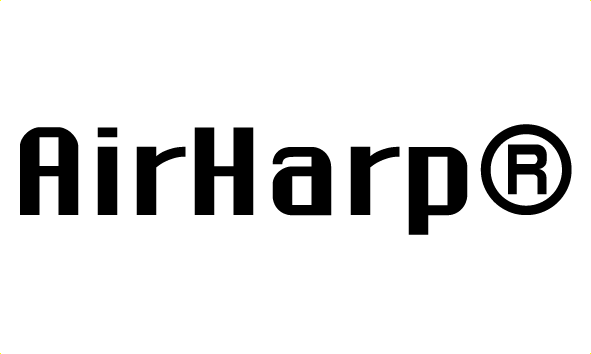
<style>
.page{position:relative;width:591px;height:354px;background:#ffffff}
.page>*{position:absolute;margin:0}
.t1{font:116.7px "ChicagoFLF";color:#000000}
</style>
<div class="page">
<p class="t1" style="left:20px;top:124px;width:552px;height:111px">AirHarp®</p>
</div>
